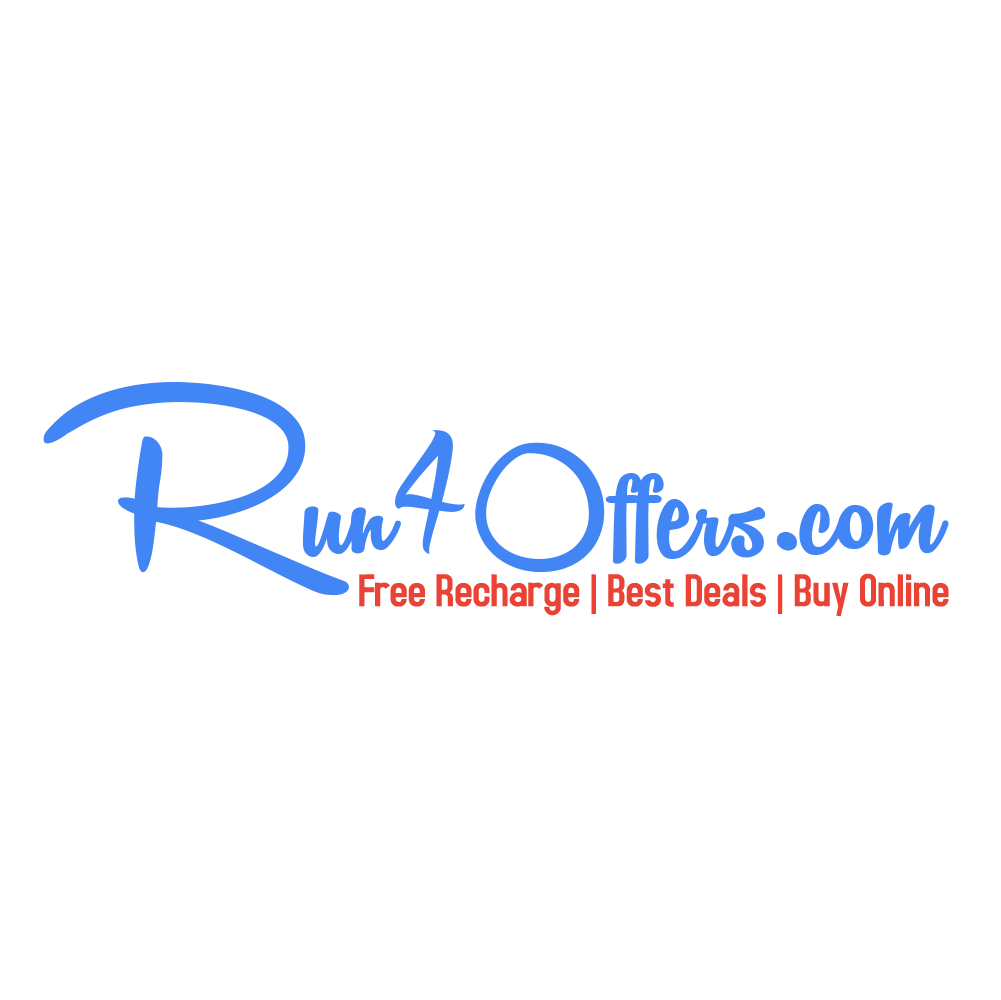
<style>
.page{position:relative;width:1001px;height:1000px;background:#ffffff}
.page>*{position:absolute;margin:0}
.t1{font:176.7px "RemachineScriptPersonalUse";color:#4285f4}
.t2{font:265px "RemachineScriptPersonalUse";color:#4285f4}
.t3{font:176.7px "DeadlyInked";color:#4285f4}
.t4{font:48.6px "AccidentalPresidency";color:#ea4335}
</style>
<div class="page">
<p class="t1" style="left:43px;top:381px;width:906px;height:215px"><span class="t2">R</span>un<span class="t3">4</span>Offers.com</p>
<p class="t4" style="left:359px;top:573px;width:590px;height:43px">Free Recharge | Best Deals | Buy Online</p>
</div>
